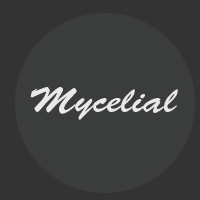
<style>
.page{position:relative;width:200px;height:200px;background:#3b3d3d}
.page>*{position:absolute;margin:0}
.t1{font:36px "BrushScriptStd";color:#e9e9e9;scale:1.11 1}
</style>
<div class="page">
<p class="t1" style="left:30px;top:87px;width:148px;height:33px">Mycelial</p>
</div>
